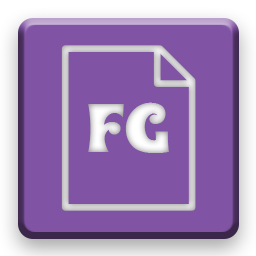
<style>
.page{position:relative;width:256px;height:256px;background:#8153a4}
.page>*{position:absolute;margin:0}
.t1{font:66.7px "Wonderbar2.0"}
</style>
<div class="page">
<p class="t1" style="left:88px;top:102px;width:81px;height:51px">FG</p>
</div>
